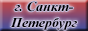
<style>
.page{position:relative;width:88px;height:31px}
.page>*{position:absolute;margin:0}
.t1{font:13.3px "TimesNewRomanPS-BoldItalicMT";color:#000000;scale:1.06 1}
</style>
<div class="page">
<p class="t1" style="left:10px;top:1px;width:67px;height:29px;text-align:center">г. Санкт-<br>Петербург</p>
</div>
